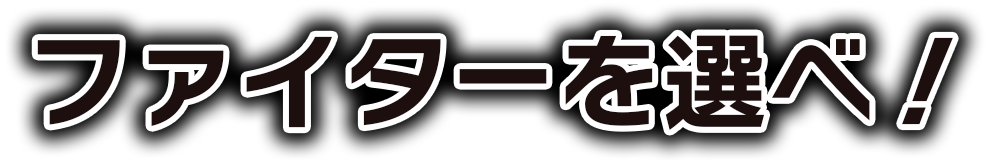
<style>
.page{position:relative;width:990px;height:160px;background:#ffffff}
.page>*{position:absolute;margin:0}
.t1{font:106px "NitalagoRuika-06";color:#1e0f0f}
</style>
<div class="page">
<p class="t1" style="left:37px;top:35px;width:916px;height:95px">ファイターを選べ！</p>
</div>
